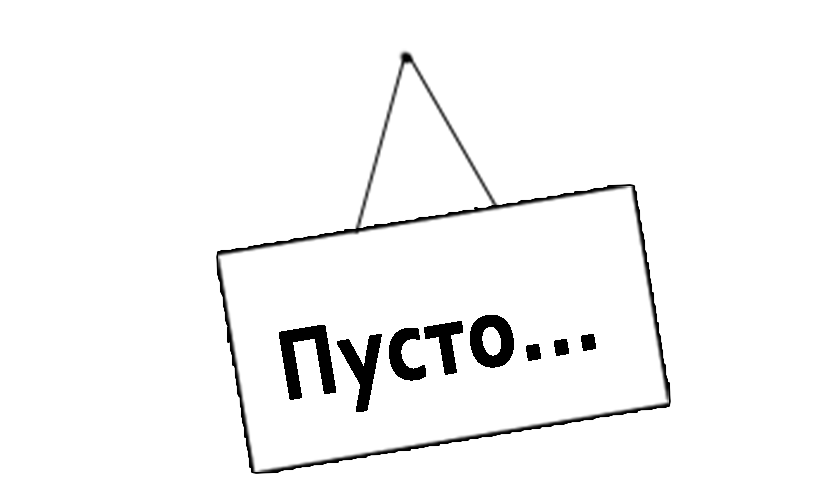
<style>
.page{position:relative;width:833px;height:500px;background:#ffffff}
.page>*{position:absolute;margin:0}
.t1{font:102.5px "Corbel-Bold";color:#000000;font-weight:bold;scale:0.85 1}
</style>
<div class="page">
<p class="t1" style="left:279px;top:315px;width:317px;height:97px;rotate:-9deg">Пусто...</p>
</div>
